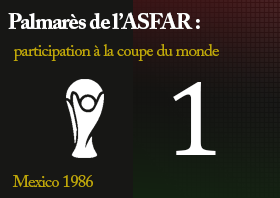
<style>
.page{position:relative;width:280px;height:198px;background:#171715}
.page>*{position:absolute;margin:0}
.t1{font:22.2px "ACaslonPro-Bold";letter-spacing:-0.04em;color:#ffffff}
.t2{font:16.7px "ACaslonPro-Regular";letter-spacing:-0.04em;color:#c0a808}
.t3{font:107.8px "CambriaMath";letter-spacing:-0.04em;color:#ffffff}
</style>
<div class="page">
<p class="t1" style="left:8px;top:12px;width:192px;height:17px">Palmarès de l’ASFAR :</p>
<p class="t2" style="left:13px;top:44px;width:206px;height:17px">participation à la coupe du monde</p>
<p class="t3" style="left:173px;top:82px;width:43px;height:73px">1</p>
<p class="t2" style="left:12px;top:175px;width:81px;height:12px">Mexico 1986</p>
</div>
